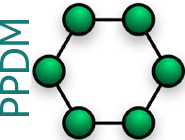
<style>
.page{position:relative;width:185px;height:140px;background:#ffffff}
.page>*{position:absolute;margin:0}
.t1{font:40px "Tahoma";color:#177a79}
</style>
<div class="page">
<p class="t1" style="left:0px;top:20px;width:29px;height:96px;rotate:-90deg">PPDM</p>
</div>
